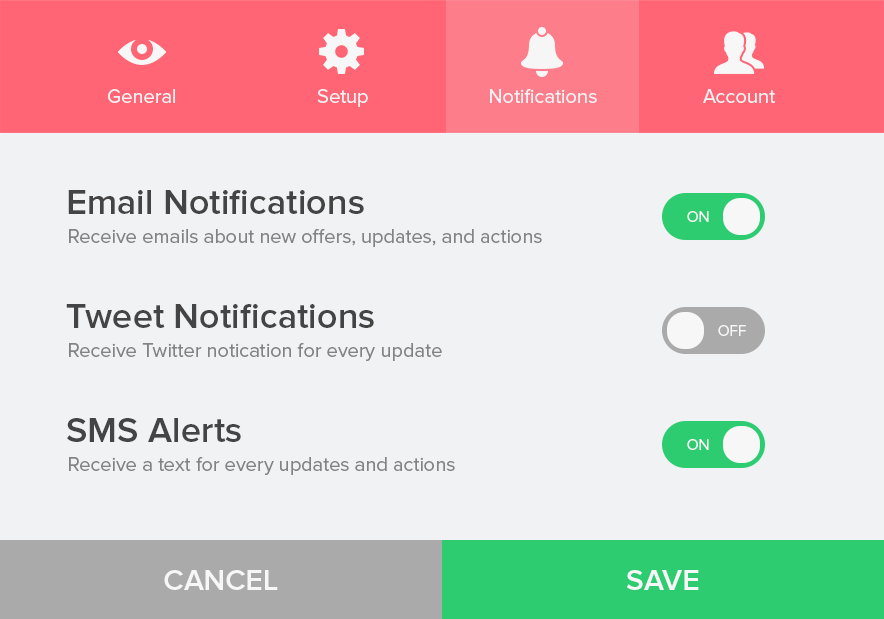
<style>
.page{position:relative;width:884px;height:619px;background:#f1f2f3}
.page>*{position:absolute;margin:0}
.t1{font:20px "ProximaNova-Regular";color:#f1f2f3}
.t2{font:36px "ProximaNova-Semibold";color:#444444}
.t3{font:15.4px "ProximaNova-Regular";color:#f7f7f7}
.t4{font:20px "ProximaNova-Regular";color:#828383}
.t5{font:30px "ProximaNova-Semibold";color:#f7f7f7}
</style>
<div class="page">
<p class="t1" style="left:108px;top:89px;width:67px;height:14px">General</p>
<p class="t1" style="left:317px;top:89px;width:51px;height:18px">Setup</p>
<p class="t1" style="left:490px;top:89px;width:107px;height:14px">Notifications</p>
<p class="t1" style="left:703px;top:89px;width:73px;height:14px">Account</p>
<p class="t2" style="left:68px;top:190px;width:296px;height:24px">Email Notifications</p>
<p class="t3" style="left:687px;top:211px;width:22px;height:11px">ON</p>
<p class="t4" style="left:69px;top:229px;width:473px;height:18px">Receive emails about new offers, updates, and actions</p>
<p class="t2" style="left:66px;top:304px;width:308px;height:24px">Tweet Notifications</p>
<p class="t3" style="left:718px;top:325px;width:28px;height:11px">OFF</p>
<p class="t4" style="left:69px;top:343px;width:373px;height:18px">Receive Twitter notication for every update</p>
<p class="t2" style="left:67px;top:418px;width:174px;height:24px">SMS Alerts</p>
<p class="t3" style="left:687px;top:439px;width:22px;height:11px">ON</p>
<p class="t4" style="left:69px;top:457px;width:386px;height:18px">Receive a text for every updates and actions</p>
<p class="t5" style="left:164px;top:570px;width:114px;height:20px">CANCEL</p>
<p class="t5" style="left:627px;top:570px;width:72px;height:20px">SAVE</p>
</div>
